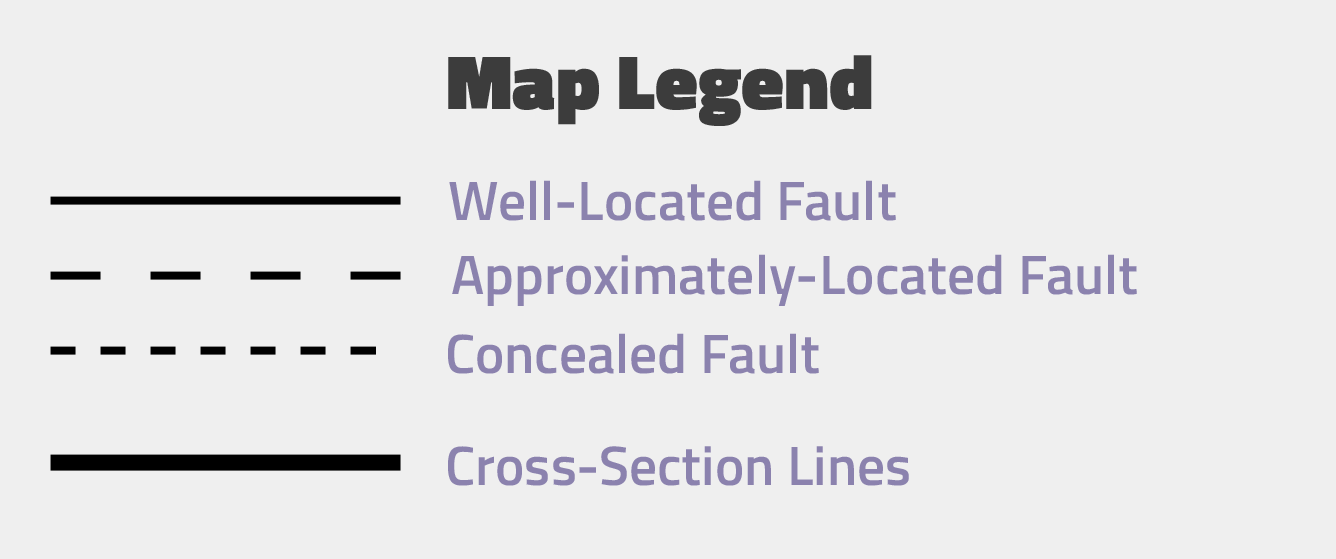
<style>
.page{position:relative;width:1336px;height:559px;background:#efefef}
.page>*{position:absolute;margin:0}
.t1{font:77.8px "TitilliumWeb-Black";color:#3c3c3c}
.t2{font:55.6px "TitilliumWeb-SemiBold";color:#8b82ae}
</style>
<div class="page">
<p class="t1" style="left:448px;top:55px;width:424px;height:71px">Map Legend</p>
<p class="t2" style="left:449px;top:180px;width:447px;height:41px">Well-Located Fault</p>
<p class="t2" style="left:452px;top:254px;width:685px;height:52px">Approximately-Located Fault</p>
<p class="t2" style="left:448px;top:333px;width:371px;height:41px">Concealed Fault</p>
<p class="t2" style="left:448px;top:446px;width:461px;height:40px">Cross-Section Lines</p>
</div>
